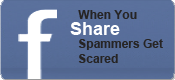
<style>
.page{position:relative;width:175px;height:80px}
.page>*{position:absolute;margin:0}
.t1{font:12px "Arial-BoldMT";color:#262424}
.t2{font:18px "Arial-BoldMT";color:#ffffff}
</style>
<div class="page">
<p class="t1" style="left:78px;top:10px;width:85px;height:53px">When You <br><br>Spammers Get<br>Scared</p>
<p class="t2" style="left:70px;top:22px;width:50px;height:13px">Share</p>
</div>
